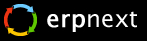
<style>
.page{position:relative;width:147px;height:41px;background:#000000}
.page>*{position:absolute;margin:0}
.t1{font:24px "LucidaGrande";color:#ffffff}
.t2{font:24px "LucidaGrande";color:#ffffff;font-weight:bold}
</style>
<div class="page">
<p class="t1" style="left:47px;top:11px;width:90px;height:21px"><span class="t2">erp</span>next</p>
</div>
